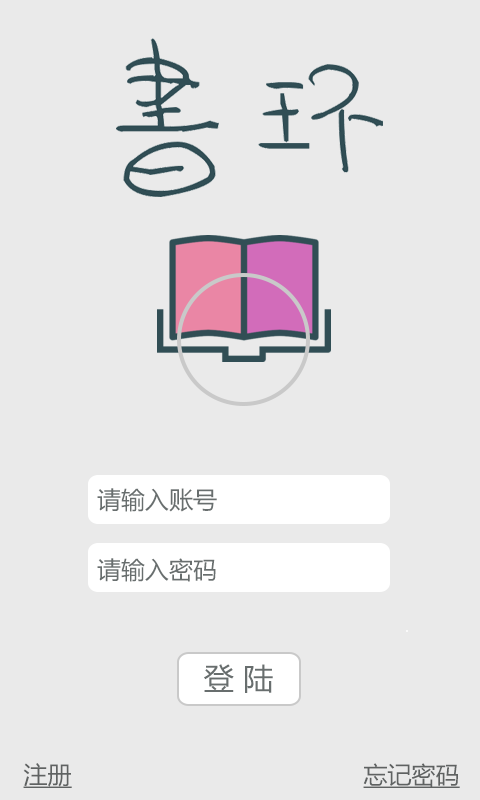
<style>
.page{position:relative;width:480px;height:800px;background:#eaeaea}
.page>*{position:absolute;margin:0}
.t1{font:24px "MicrosoftYaHei";color:#686e6e}
.t2{font:30px "MicrosoftYaHei";color:#686e6e}
.t3{font:24px "MicrosoftYaHei";color:#5f6262;text-decoration:underline}
</style>
<div class="page">
<p class="t1" style="left:97px;top:488px;width:120px;height:24px">请输入账号</p>
<p class="t1" style="left:97px;top:558px;width:119px;height:24px">请输入密码</p>
<p class="t2" style="left:204px;top:664px;width:69px;height:29px">登 陆</p>
<p class="t3" style="left:23px;top:763px;width:49px;height:25px">注册</p>
<p class="t3" style="left:363px;top:763px;width:97px;height:25px">忘记密码？</p>
</div>
